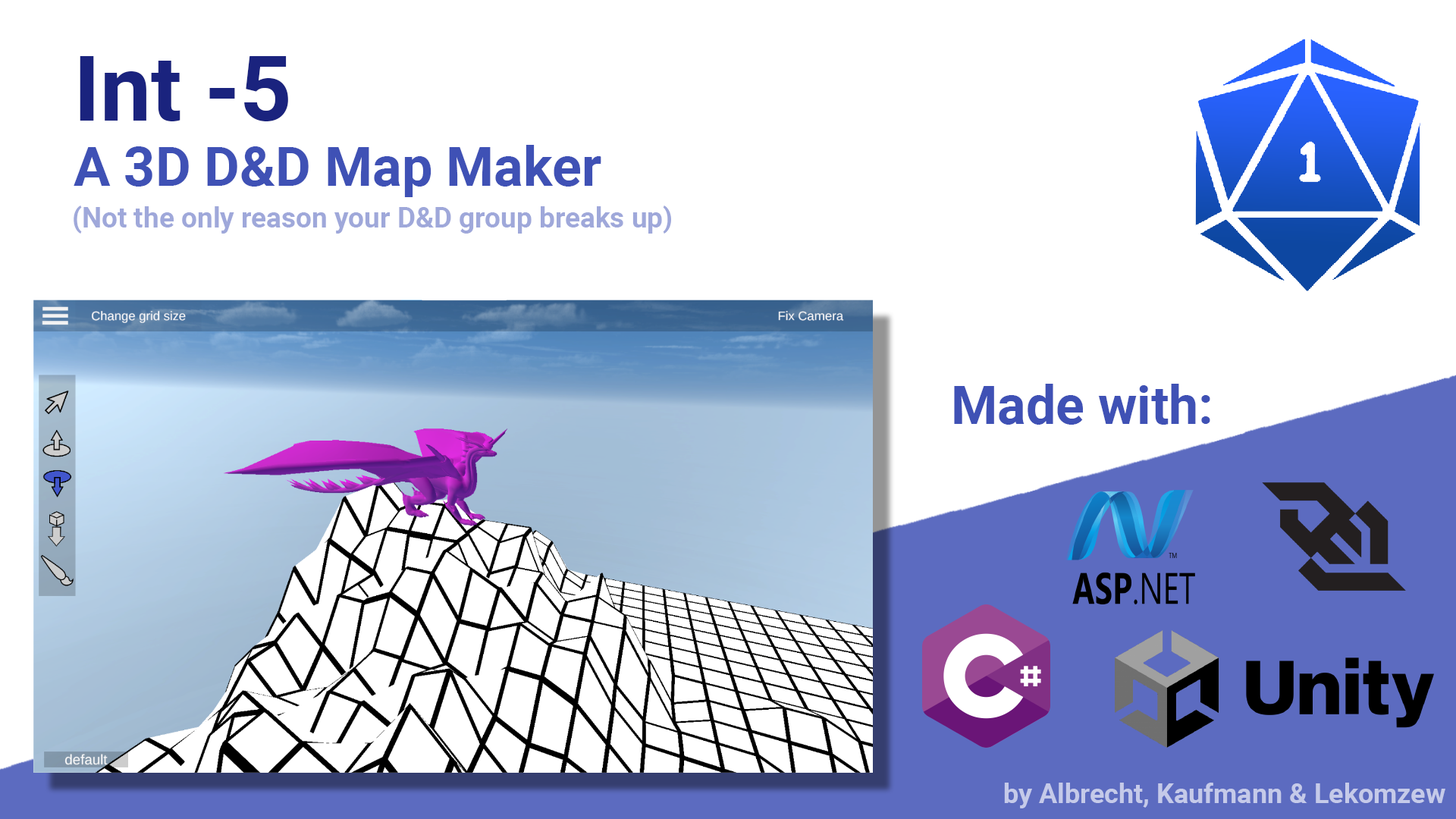
<style>
.page{position:relative;width:1456px;height:819px;background:#ffffff}
.page>*{position:absolute;margin:0}
.t1{font:54.6px "Roboto-Bold";color:#3f51b5}
.t2{font:91px "Roboto-Bold";color:#1a237e}
.t3{font:28.1px "Roboto-Bold";color:#9fa8da}
.t4{font:53.1px "Roboto-Bold";color:#3f51b5}
.t5{font:27.3px "Roboto-Bold";color:#c5cae9}
</style>
<div class="page">
<p class="t1" style="left:74px;top:56px;width:527px;height:141px"><span class="t2">Int -5<br></span>A 3D D&amp;D Map Maker</p>
<p class="t3" style="left:74px;top:206px;width:597px;height:28px">(Not the only reason your D&amp;D group breaks up)</p>
<p class="t4" style="left:954px;top:384px;width:256px;height:41px">Made with:</p>
<p class="t5" style="left:1004px;top:783px;width:441px;height:25px">by Albrecht, Kaufmann &amp; Lekomzew</p>
</div>
